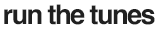
<style>
.page{position:relative;width:160px;height:30px;background:#ffffff}
.page>*{position:absolute;margin:0}
.t1{font:27.3px "Helvetica-Bold";letter-spacing:-0.062em;color:#202020}
</style>
<div class="page">
<p class="t1" style="left:4px;top:4px;width:151px;height:21px">run the tunes</p>
</div>
